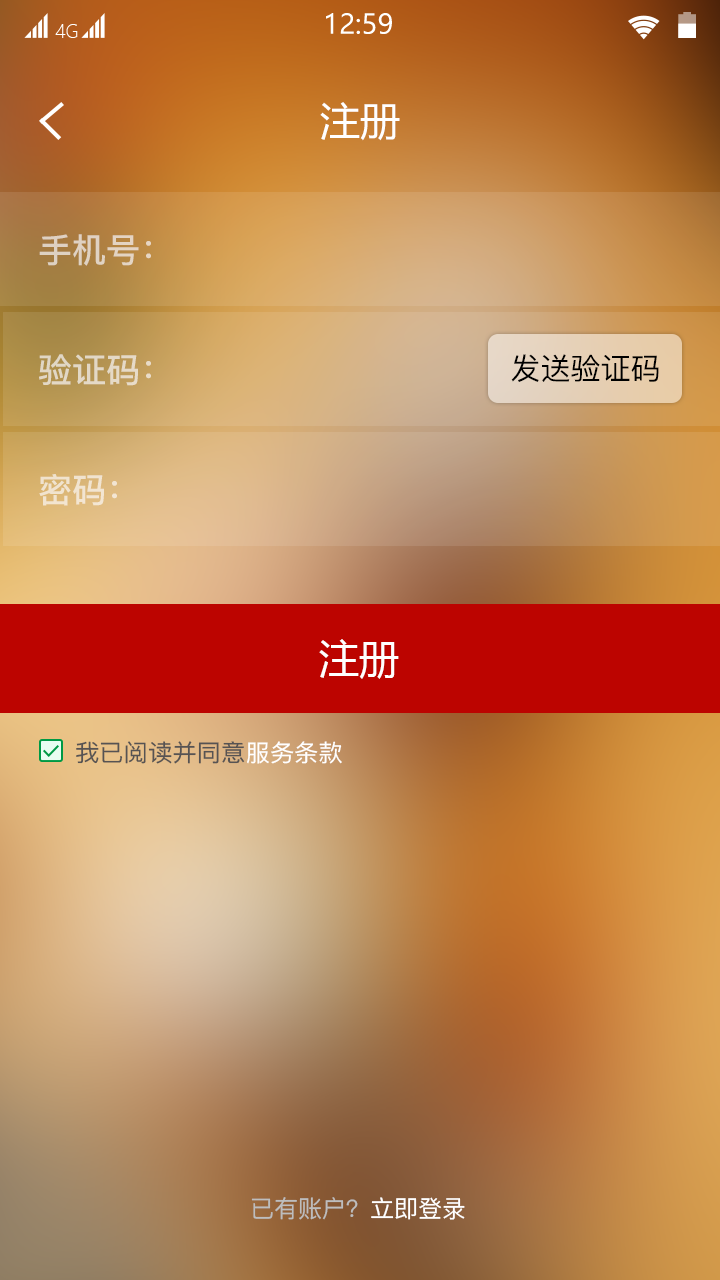
<style>
.page{position:relative;width:720px;height:1280px}
.page>*{position:absolute;margin:0}
.t1{font:27.1px "MicrosoftYaHei";color:#f5f5f5}
.t2{font:18px "MicrosoftYaHeiLight";color:#ffffff}
.t3{font:39.5px "MicrosoftYaHei";color:#ffffff}
.t4{font:34px "PingFang-SC-Bold";color:#e0d1c2}
.t5{font:34px "PingFang-SC-Bold";color:#e3d8c6}
.t6{font:30px "PingFang-SC-Medium";color:#000000}
.t7{font:34px "PingFang-SC-Bold";color:#f1e4cf}
.t8{font:40px "MicrosoftYaHei";color:#ffffff}
.t9{font:23.8px "PingFang-SC-Medium";color:#565353}
.t10{font:23.8px "PingFang-SC-Medium";color:#ffffff}
.t11{font:24px "PingFang-SC-Medium";color:#bdbdbd}
.t12{font:24px "PingFang-SC-Medium";color:#ffffff}
</style>
<div class="page">
<p class="t1" style="left:326px;top:13px;width:66px;height:21px">12:59</p>
<p class="t2" style="left:55px;top:24px;width:23px;height:14px">4G</p>
<p class="t3" style="left:320px;top:102px;width:80px;height:39px">注册</p>
<p class="t4" style="left:39px;top:234px;width:112px;height:32px">手机号：</p>
<p class="t5" style="left:39px;top:354px;width:112px;height:32px">验证码：</p>
<p class="t6" style="left:511px;top:354px;width:148px;height:28px">发送验证码</p>
<p class="t7" style="left:39px;top:474px;width:78px;height:32px">密码：</p>
<p class="t8" style="left:319px;top:639px;width:80px;height:40px">注册</p>
<p class="t9" style="left:76px;top:741px;width:266px;height:23px">我已阅读并同意<span class="t10">服务条款</span></p>
<p class="t11" style="left:251px;top:1197px;width:214px;height:23px">已有账户？<span class="t12">立即登录</span></p>
</div>
